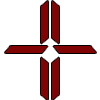
<style>
.page{position:relative;width:100px;height:100px;background:#ffffff}
.page>*{position:absolute;margin:0}
.t1{font:50.5px "BatmanForeverAlternate";letter-spacing:-0.06em;color:#800404;text-transform:uppercase;scale:1.5 1}
</style>
<div class="page">
<p class="t1" style="left:41px;top:1px;width:7px;height:43px;rotate:90deg">-</p>
<p class="t1" style="left:52px;top:1px;width:7px;height:43px;rotate:90deg">-</p>
<p class="t1" style="left:5px;top:46px;width:43px;height:7px">-</p>
<p class="t1" style="left:53px;top:46px;width:43px;height:7px;rotate:180deg">-</p>
<p class="t1" style="left:41px;top:57px;width:7px;height:43px;rotate:-90deg">-</p>
<p class="t1" style="left:52px;top:57px;width:7px;height:43px;rotate:-90deg">-</p>
</div>
